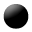
<style>
.page{position:relative;width:32px;height:32px;background:#ffffff}
.page>*{position:absolute;margin:0}
.t1{font:30px "MS-Gothic";color:#000000}
</style>
<div class="page">
<p class="t1" style="left:3px;top:4px;width:26px;height:25px">●</p>
</div>
